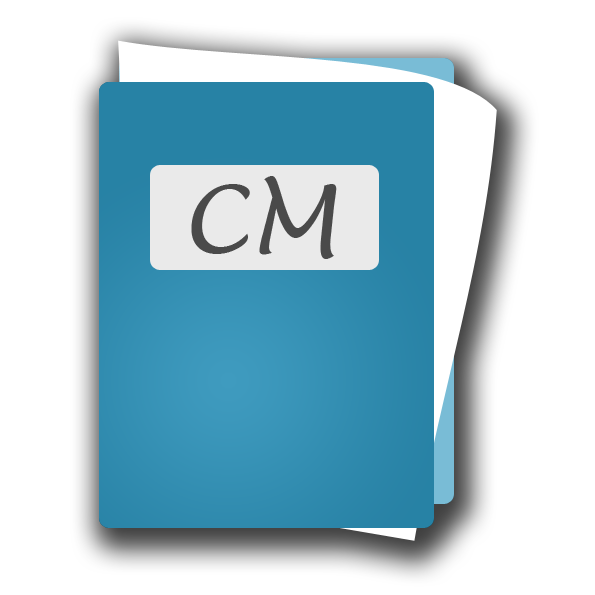
<style>
.page{position:relative;width:595px;height:595px;background:#ffffff}
.page>*{position:absolute;margin:0}
.t1{font:93.8px "LucidaHandwriting-Italic";color:#4a4a4a}
</style>
<div class="page">
<p class="t1" style="left:191px;top:176px;width:146px;height:83px">CM</p>
</div>
